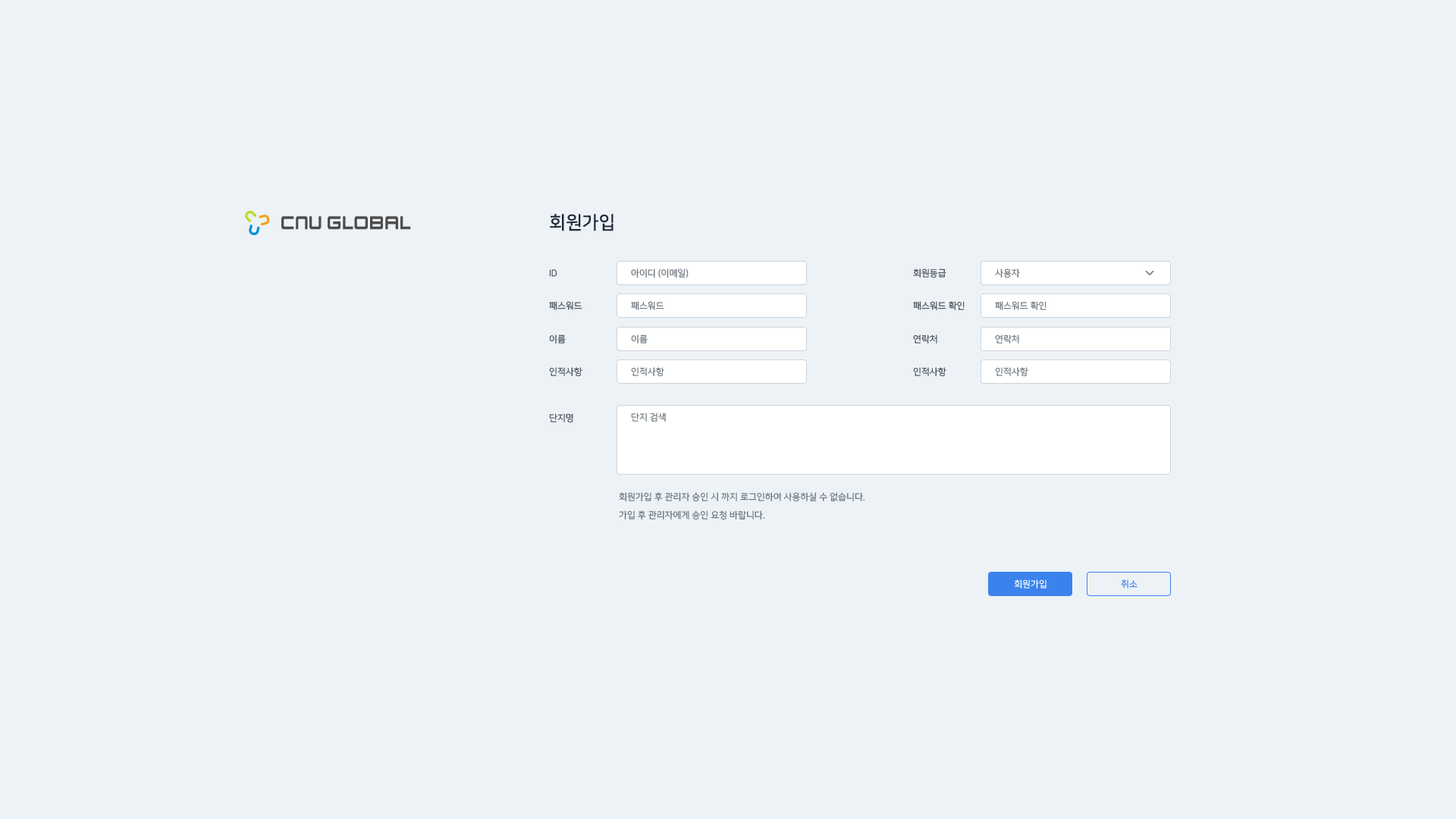
<style>
.page{position:relative;width:1456px;height:819px;background:#ecf2f6}
.page>*{position:absolute;margin:0}
.t1{font:18.2px "NanumSquareB";color:#212738}
.t2{font:9.1px "NanumSquareR";color:#495057}
.t3{font:9.1px "NanumSquareR";color:#6c757d}
.t4{font:9.1px "NanumSquareR"}
.t5{font:9.1px/18.2px "NanumSquareR";color:#6c757d}
.t6{font:9.1px "NanumSquareR";color:#ffffff}
.t7{font:9.1px "NanumSquareR";color:#3b82ec}
</style>
<div class="page">
<p class="t1" style="left:550px;top:214px;width:63px;height:17px">회원가입</p>
<p class="t2" style="left:549px;top:269px;width:8px;height:8px">ID</p>
<p class="t3" style="left:631px;top:268px;width:58px;height:10px">아이디 (이메일)</p>
<p class="t4" style="left:913px;top:268px;width:33px;height:10px">회원등급</p>
<p class="t3" style="left:995px;top:268px;width:25px;height:10px">사용자</p>
<p class="t2" style="left:549px;top:301px;width:33px;height:9px">패스워드</p>
<p class="t3" style="left:631px;top:301px;width:33px;height:9px">패스워드</p>
<p class="t2" style="left:913px;top:301px;width:52px;height:9px">패스워드 확인</p>
<p class="t3" style="left:995px;top:301px;width:51px;height:9px">패스워드 확인</p>
<p class="t4" style="left:549px;top:334px;width:17px;height:10px">이름</p>
<p class="t4" style="left:631px;top:334px;width:17px;height:10px">이름</p>
<p class="t2" style="left:913px;top:334px;width:24px;height:10px">연락처</p>
<p class="t3" style="left:995px;top:334px;width:24px;height:10px">연락처</p>
<p class="t2" style="left:549px;top:367px;width:33px;height:10px">인적사항</p>
<p class="t3" style="left:631px;top:367px;width:33px;height:10px">인적사항</p>
<p class="t2" style="left:913px;top:367px;width:33px;height:10px">인적사항</p>
<p class="t3" style="left:995px;top:367px;width:33px;height:10px">인적사항</p>
<p class="t4" style="left:549px;top:413px;width:24px;height:10px">단지명</p>
<p class="t4" style="left:631px;top:413px;width:35px;height:9px">단지 검색</p>
<p class="t5" style="left:619px;top:492px;width:245px;height:28px">회원가입 후 관리자 승인 시 까지 로그인하여 사용하실 수 없습니다.<br>가입 후 관리자에게 승인 요청 바랍니다.</p>
<p class="t6" style="left:1014px;top:579px;width:32px;height:9px">회원가입</p>
<p class="t7" style="left:1121px;top:579px;width:16px;height:9px">취소</p>
</div>
